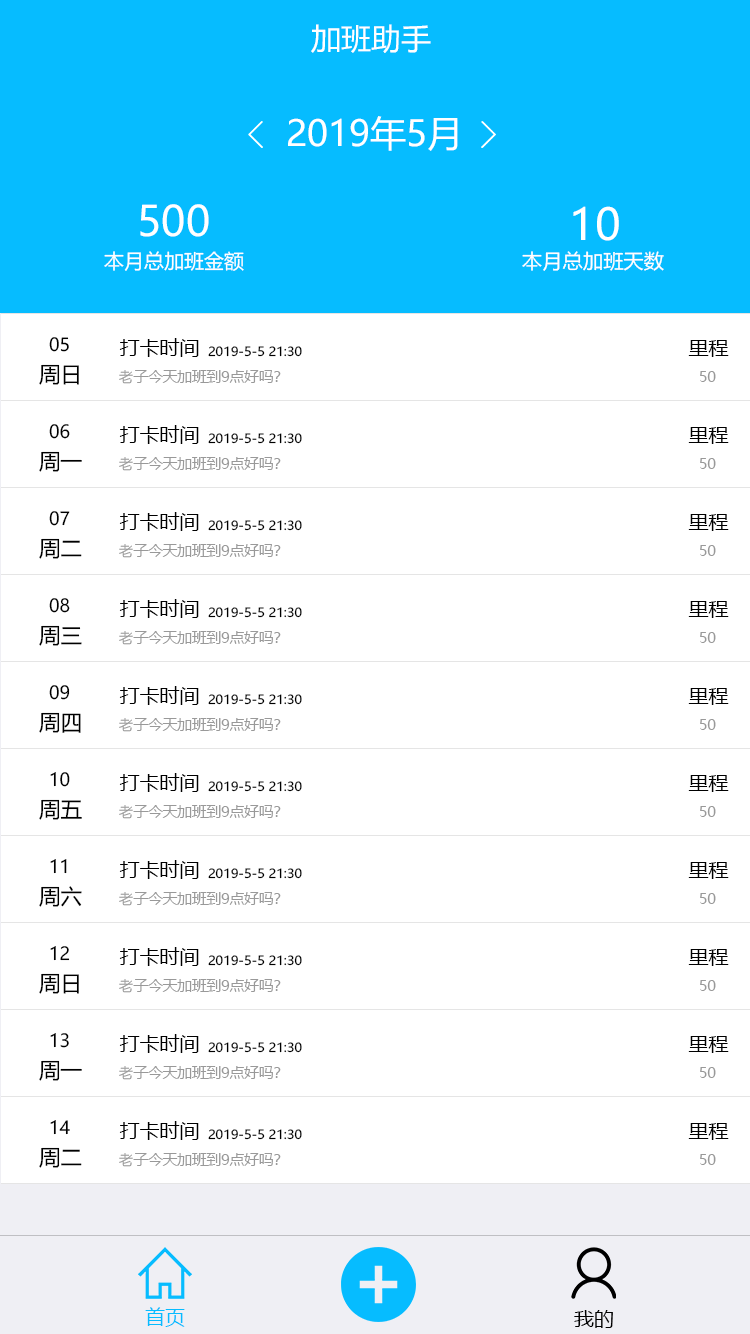
<style>
.page{position:relative;width:750px;height:1334px;background:#ffffff}
.page>*{position:absolute;margin:0}
.t1{font:29.7px "MicrosoftYaHei";color:#ffffff}
.t2{font:35.6px "MicrosoftYaHei";color:#ffffff}
.t3{font:41.3px "MicrosoftYaHei";color:#ffffff}
.t4{font:43.1px "MicrosoftYaHei";color:#ffffff}
.t5{font:19.8px "MicrosoftYaHei";color:#ffffff}
.t6{font:18px "MicrosoftYaHei";color:#000000}
.t7{font:20px "MicrosoftYaHei";color:#000000}
.t8{font:12.6px "MicrosoftYaHei";color:#000000}
.t9{font:21.6px "MicrosoftYaHei";color:#000000}
.t10{font:14.6px "MicrosoftYaHei";color:#999999}
.t11{font:20px "MicrosoftYaHei";color:#06bcff}
</style>
<div class="page">
<p class="t1" style="left:311px;top:24px;width:120px;height:29px">加班助手</p>
<p class="t2" style="left:288px;top:116px;width:170px;height:35px">2019年5月</p>
<p class="t3" style="left:140px;top:204px;width:69px;height:33px">500</p>
<p class="t4" style="left:573px;top:206px;width:46px;height:35px">10</p>
<p class="t5" style="left:104px;top:251px;width:140px;height:20px">本月总加班金额</p>
<p class="t5" style="left:522px;top:251px;width:142px;height:20px">本月总加班天数</p>
<p class="t6" style="left:49px;top:337px;width:20px;height:15px">05</p>
<p class="t7" style="left:119px;top:338px;width:80px;height:19px">打卡时间</p>
<p class="t7" style="left:688px;top:340px;width:41px;height:17px">里程</p>
<p class="t8" style="left:208px;top:346px;width:94px;height:11px">2019-5-5 21:30</p>
<p class="t9" style="left:39px;top:364px;width:40px;height:21px">周日</p>
<p class="t10" style="left:119px;top:370px;width:162px;height:14px">老子今天加班到9点好吗？</p>
<p class="t10" style="left:700px;top:371px;width:16px;height:11px">50</p>
<p class="t6" style="left:49px;top:424px;width:21px;height:15px">06</p>
<p class="t7" style="left:119px;top:425px;width:80px;height:19px">打卡时间</p>
<p class="t8" style="left:208px;top:433px;width:94px;height:11px">2019-5-5 21:30</p>
<p class="t7" style="left:688px;top:427px;width:41px;height:17px">里程</p>
<p class="t9" style="left:39px;top:451px;width:43px;height:21px">周一</p>
<p class="t10" style="left:119px;top:457px;width:162px;height:14px">老子今天加班到9点好吗？</p>
<p class="t10" style="left:700px;top:458px;width:16px;height:11px">50</p>
<p class="t6" style="left:49px;top:511px;width:21px;height:15px">07</p>
<p class="t7" style="left:119px;top:512px;width:80px;height:19px">打卡时间</p>
<p class="t8" style="left:208px;top:520px;width:94px;height:11px">2019-5-5 21:30</p>
<p class="t7" style="left:688px;top:514px;width:41px;height:17px">里程</p>
<p class="t9" style="left:39px;top:538px;width:43px;height:21px">周二</p>
<p class="t10" style="left:119px;top:544px;width:162px;height:14px">老子今天加班到9点好吗？</p>
<p class="t10" style="left:700px;top:545px;width:16px;height:11px">50</p>
<p class="t6" style="left:49px;top:598px;width:21px;height:15px">08</p>
<p class="t7" style="left:119px;top:599px;width:80px;height:19px">打卡时间</p>
<p class="t7" style="left:688px;top:601px;width:41px;height:17px">里程</p>
<p class="t8" style="left:208px;top:607px;width:94px;height:11px">2019-5-5 21:30</p>
<p class="t9" style="left:39px;top:625px;width:43px;height:21px">周三</p>
<p class="t10" style="left:119px;top:631px;width:162px;height:14px">老子今天加班到9点好吗？</p>
<p class="t10" style="left:700px;top:632px;width:16px;height:11px">50</p>
<p class="t6" style="left:49px;top:685px;width:21px;height:15px">09</p>
<p class="t7" style="left:119px;top:686px;width:80px;height:19px">打卡时间</p>
<p class="t7" style="left:688px;top:688px;width:41px;height:17px">里程</p>
<p class="t8" style="left:208px;top:694px;width:94px;height:11px">2019-5-5 21:30</p>
<p class="t9" style="left:39px;top:712px;width:42px;height:21px">周四</p>
<p class="t10" style="left:119px;top:718px;width:162px;height:14px">老子今天加班到9点好吗？</p>
<p class="t10" style="left:700px;top:719px;width:16px;height:11px">50</p>
<p class="t6" style="left:50px;top:772px;width:20px;height:15px">10</p>
<p class="t7" style="left:119px;top:773px;width:80px;height:19px">打卡时间</p>
<p class="t8" style="left:208px;top:781px;width:94px;height:11px">2019-5-5 21:30</p>
<p class="t7" style="left:688px;top:775px;width:41px;height:17px">里程</p>
<p class="t9" style="left:39px;top:799px;width:43px;height:21px">周五</p>
<p class="t10" style="left:119px;top:805px;width:162px;height:14px">老子今天加班到9点好吗？</p>
<p class="t10" style="left:700px;top:806px;width:16px;height:11px">50</p>
<p class="t6" style="left:50px;top:859px;width:17px;height:15px">11</p>
<p class="t7" style="left:119px;top:860px;width:80px;height:19px">打卡时间</p>
<p class="t8" style="left:208px;top:868px;width:94px;height:11px">2019-5-5 21:30</p>
<p class="t7" style="left:688px;top:862px;width:41px;height:17px">里程</p>
<p class="t9" style="left:39px;top:886px;width:43px;height:21px">周六</p>
<p class="t10" style="left:119px;top:892px;width:162px;height:14px">老子今天加班到9点好吗？</p>
<p class="t10" style="left:700px;top:893px;width:16px;height:11px">50</p>
<p class="t6" style="left:50px;top:946px;width:20px;height:15px">12</p>
<p class="t7" style="left:119px;top:947px;width:80px;height:19px">打卡时间</p>
<p class="t7" style="left:688px;top:949px;width:41px;height:17px">里程</p>
<p class="t8" style="left:208px;top:955px;width:94px;height:11px">2019-5-5 21:30</p>
<p class="t9" style="left:39px;top:973px;width:40px;height:21px">周日</p>
<p class="t10" style="left:119px;top:979px;width:162px;height:14px">老子今天加班到9点好吗？</p>
<p class="t10" style="left:700px;top:980px;width:16px;height:11px">50</p>
<p class="t6" style="left:50px;top:1033px;width:19px;height:15px">13</p>
<p class="t7" style="left:119px;top:1034px;width:80px;height:19px">打卡时间</p>
<p class="t7" style="left:688px;top:1036px;width:41px;height:17px">里程</p>
<p class="t8" style="left:208px;top:1042px;width:94px;height:11px">2019-5-5 21:30</p>
<p class="t9" style="left:39px;top:1060px;width:43px;height:21px">周一</p>
<p class="t10" style="left:119px;top:1066px;width:162px;height:14px">老子今天加班到9点好吗？</p>
<p class="t10" style="left:700px;top:1067px;width:16px;height:11px">50</p>
<p class="t6" style="left:50px;top:1120px;width:20px;height:15px">14</p>
<p class="t7" style="left:119px;top:1121px;width:80px;height:19px">打卡时间</p>
<p class="t8" style="left:208px;top:1129px;width:94px;height:11px">2019-5-5 21:30</p>
<p class="t7" style="left:688px;top:1123px;width:41px;height:17px">里程</p>
<p class="t9" style="left:39px;top:1147px;width:43px;height:21px">周二</p>
<p class="t10" style="left:119px;top:1153px;width:162px;height:14px">老子今天加班到9点好吗？</p>
<p class="t10" style="left:700px;top:1154px;width:16px;height:11px">50</p>
<p class="t11" style="left:145px;top:1307px;width:40px;height:20px">首页</p>
<p class="t7" style="left:574px;top:1310px;width:39px;height:18px">我的</p>
</div>
